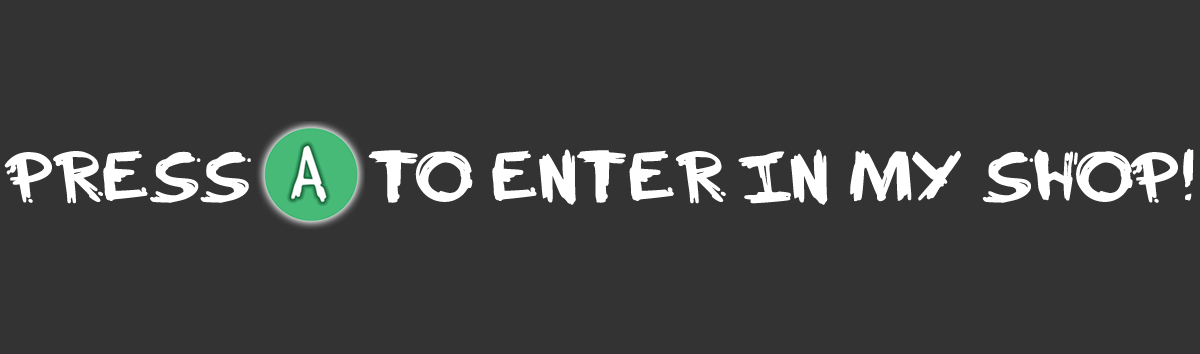
<style>
.page{position:relative;width:1200px;height:354px;background:#333333}
.page>*{position:absolute;margin:0}
.t1{font:70.8px "EverCookiez";color:#ffffff}
</style>
<div class="page">
<p class="t1" style="left:4px;top:148px;width:1190px;height:57px">press      to enter in my shop!</p>
</div>
